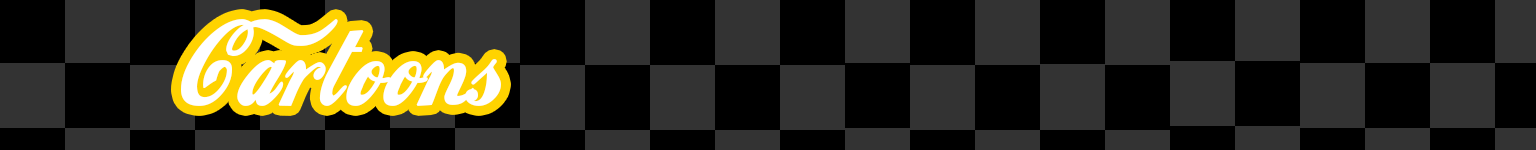
<style>
.page{position:relative;width:1536px;height:150px;background:#000000}
.page>*{position:absolute;margin:0}
.t1{font:109.5px "CocaCola";letter-spacing:0.005em;color:#ffffff;font-weight:bold}
</style>
<div class="page">
<p class="t1" style="left:181px;top:19px;width:320px;height:87px">Cartoons</p>
</div>
